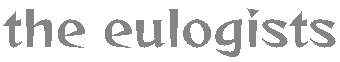
<style>
.page{position:relative;width:340px;height:62px;background:#ffffff}
.page>*{position:absolute;margin:0}
.t1{font:48.6px "ReggaeOne-Regular";color:#848484}
</style>
<div class="page">
<p class="t1" style="left:3px;top:8px;width:333px;height:49px">the eulogists</p>
</div>
